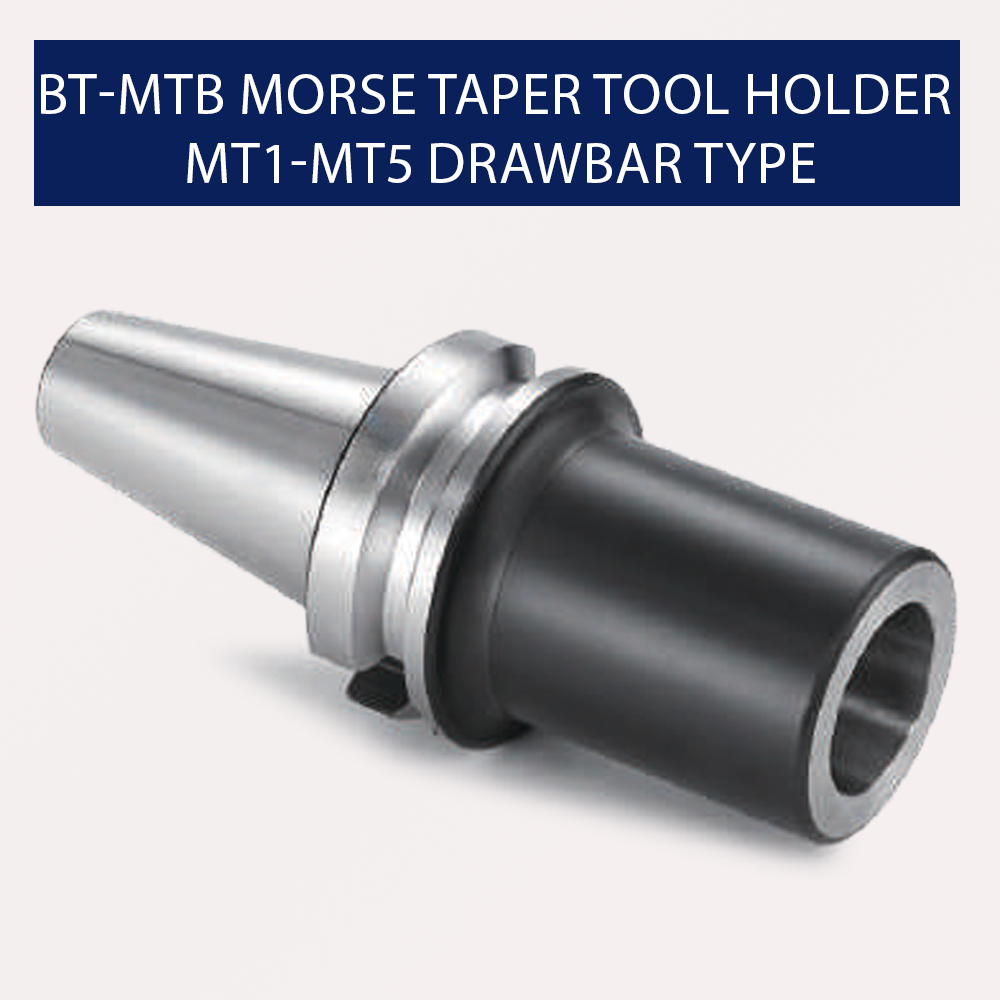
<style>
.page{position:relative;width:1000px;height:1000px;background:#f5efef}
.page>*{position:absolute;margin:0}
.t1{font:57.7px "MyriadPro-Regular";color:#ffffff;text-transform:uppercase}
</style>
<div class="page">
<p class="t1" style="left:41px;top:74px;width:910px;height:109px;text-align:center">BT-MTB Morse Taper Tool Holder <br>MT1-MT5 Drawbar Type</p>
</div>
